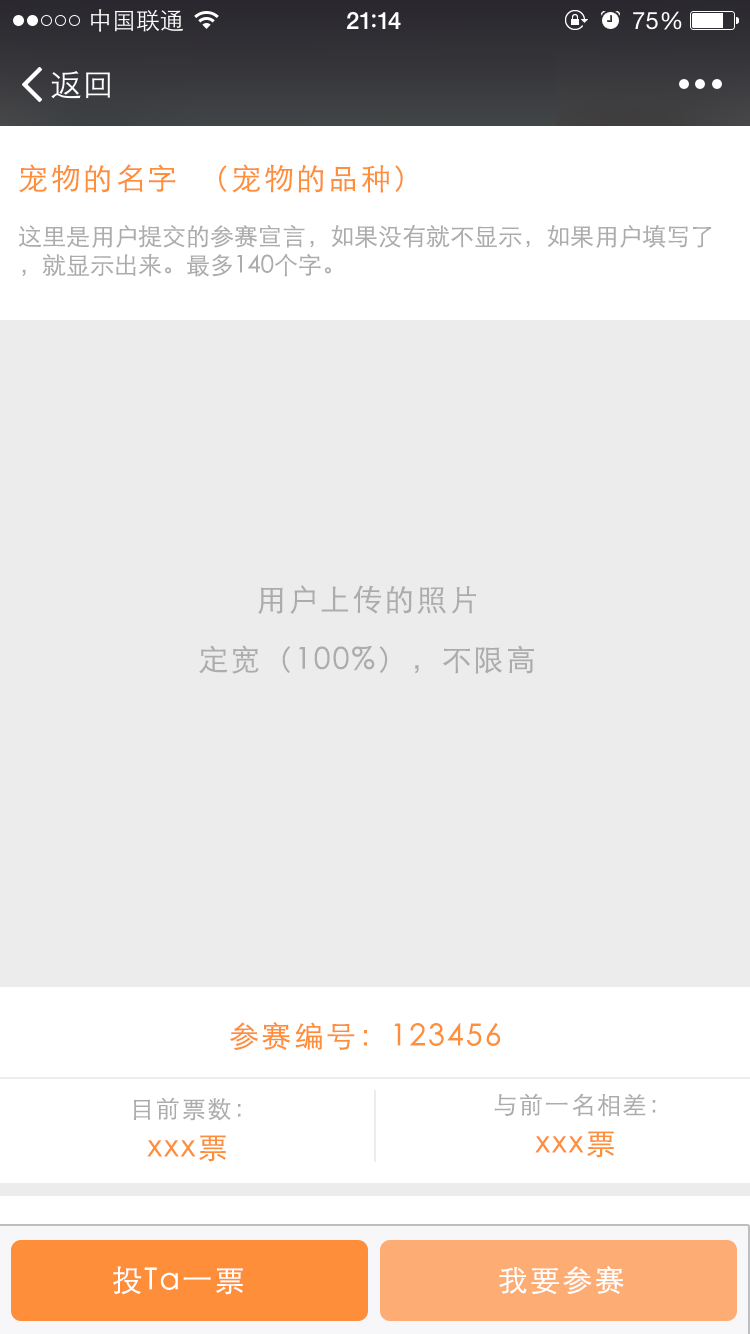
<style>
.page{position:relative;width:750px;height:1334px;background:#ececec}
.page>*{position:absolute;margin:0}
.t1{font:30px "STHeitiSC-Light";letter-spacing:0.075em;color:#ff8e3b}
.t2{font:24px "STHeitiSC-Light";color:#acacac}
.t3{font:30px/10px "STHeitiSC-Light";letter-spacing:0.075em;color:#acacac}
.t4{font:24px "STHeitiSC-Light";letter-spacing:0.075em;color:#acacac}
.t5{font:30px "STHeitiSC-Light";letter-spacing:0.075em;color:#ffffff}
</style>
<div class="page">
<p class="t1" style="left:19px;top:164px;width:157px;height:29px">宠物的名字</p>
<p class="t1" style="left:219px;top:164px;width:184px;height:29px">（宠物的品种）</p>
<p class="t2" style="left:19px;top:224px;width:693px;height:53px">这里是用户提交的参赛宣言，如果没有就不显示，如果用户填写了，就显示出来。最多140个字。</p>
<p class="t3" style="left:199px;top:585px;width:335px;height:89px;text-align:center">用户上传的照片<br>定宽（100%），不限高</p>
<p class="t1" style="left:230px;top:1022px;width:270px;height:29px">参赛编号：123456</p>
<p class="t4" style="left:134px;top:1097px;width:107px;height:24px">目前票数：</p>
<p class="t4" style="left:494px;top:1093px;width:162px;height:24px">与前一名相差：</p>
<p class="t1" style="left:535px;top:1131px;width:79px;height:27px">xxx票</p>
<p class="t1" style="left:147px;top:1135px;width:79px;height:27px">xxx票</p>
<p class="t5" style="left:113px;top:1266px;width:130px;height:29px">投Ta一票</p>
<p class="t5" style="left:499px;top:1266px;width:125px;height:29px">我要参赛</p>
</div>
